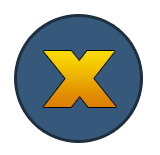
<style>
.page{position:relative;width:160px;height:155px;background:#ffffff}
.page>*{position:absolute;margin:0}
.t1{font:75.4px "GillSans-UltraBold"}
</style>
<div class="page">
<p class="t1" style="left:43px;top:51px;width:73px;height:56px">X</p>
</div>
